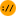
<style>
.page{position:relative;width:16px;height:16px;background:#ffa200}
.page>*{position:absolute;margin:0}
.t1{font:7px "LucidaConsole"}
</style>
<div class="page">
<p class="t1" style="left:2px;top:4px;width:12px;height:8px">://</p>
</div>
